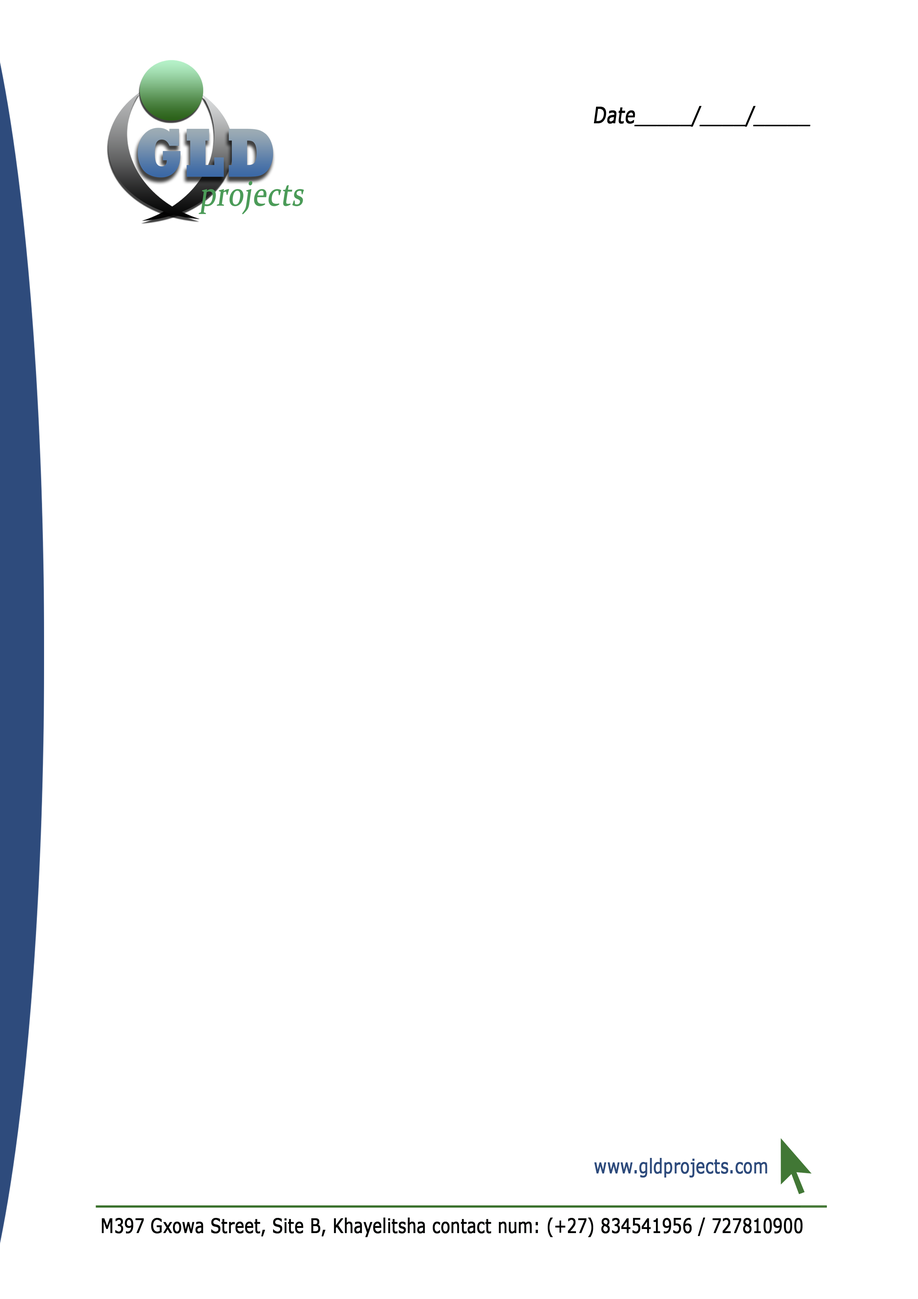
<style>
.page{position:relative;width:918px;height:1299px;background:#ffffff}
.page>*{position:absolute;margin:0}
.t1{font:22.2px "Verdana";color:#020302;font-weight:bold;font-style:italic;scale:0.77 1}
.t2{font:20px "Verdana";color:#2e4b7c;font-weight:bold;scale:0.77 1}
.t3{font:20px "Verdana";color:#020302;font-weight:bold;scale:0.77 1}
</style>
<div class="page">
<p class="t1" style="left:594px;top:106px;width:216px;height:21px">Date_____/____/_____</p>
<p class="t2" style="left:594px;top:1158px;width:173px;height:19px">www.gldprojects.com</p>
<p class="t3" style="left:102px;top:1217px;width:701px;height:20px">M397 Gxowa Street, Site B, Khayelitsha contact num: (+27) 834541956 / 727810900</p>
</div>
